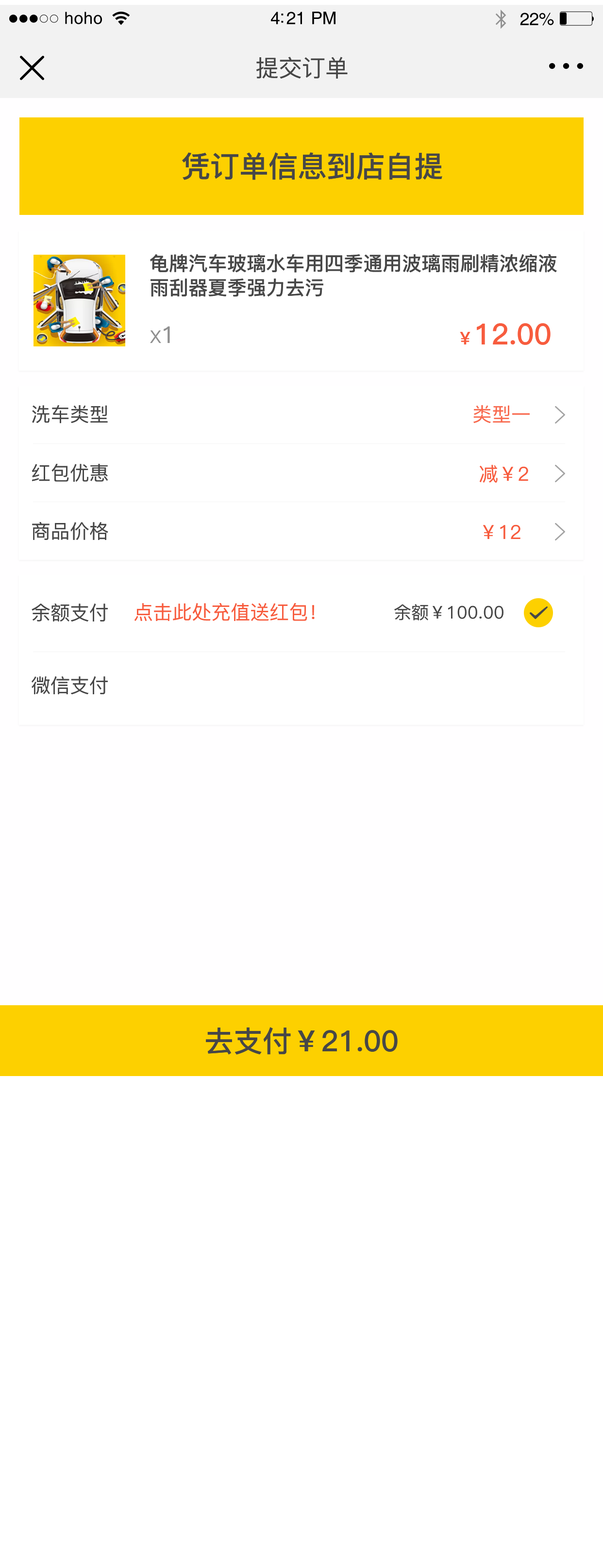
<style>
.page{position:relative;width:603px;height:1568px;background:#ffffff}
.page>*{position:absolute;margin:0}
.t1{font:16.8px "Helvetica";letter-spacing:0.02em;color:#000000}
.t2{font:17.5px "Helvetica";letter-spacing:-0.02em;color:#000000}
.t3{font:23.3px "PingFang-SC-Medium";color:#474747}
.t4{font:29.1px "PingFang-SC-Bold";color:#474747}
.t5{font:19.4px/24.3px "PingFang-SC-Bold";color:#474747}
.t6{font:17.5px "PingFang-SC-Medium";color:#909090}
.t7{font:23.3px "PingFang-SC-Medium";color:#909090}
.t8{font:29.1px "PingFang-SC-Bold";color:#f75c3e}
.t9{font:17.5px "PingFang-SC-Bold";color:#f75c3e}
.t10{font:19.4px "PingFang-SC-Medium";color:#474747}
.t11{font:19.4px "PingFang-SC-Medium";color:#f86a4f}
.t12{font:19.4px "PingFang-SC-Medium";color:#f75c3e}
.t13{font:17.5px "PingFang-SC-Medium";color:#474747}
</style>
<div class="page">
<p class="t1" style="left:65px;top:12px;width:37px;height:12px">hoho</p>
<p class="t2" style="left:271px;top:12px;width:64px;height:12px">4:21 PM</p>
<p class="t2" style="left:520px;top:13px;width:34px;height:13px">22%</p>
<p class="t3" style="left:256px;top:57px;width:91px;height:22px">提交订单</p>
<p class="t4" style="left:182px;top:152px;width:260px;height:28px">凭订单信息到店自提</p>
<p class="t5" style="left:150px;top:254px;width:406px;height:43px;text-align:justify">龟牌汽车玻璃水车用四季通用波璃雨刷精浓缩液<br>雨刮器夏季强力去污</p>
<p class="t6" style="left:150px;top:326px;width:20px;height:17px">X<span class="t7">1</span></p>
<p class="t8" style="left:459px;top:323px;width:91px;height:22px"><span class="t9">￥</span>12.00</p>
<p class="t10" style="left:32px;top:405px;width:76px;height:19px">洗车类型</p>
<p class="t11" style="left:473px;top:405px;width:56px;height:18px">类型一</p>
<p class="t10" style="left:32px;top:464px;width:76px;height:18px">红包优惠</p>
<p class="t12" style="left:479px;top:465px;width:49px;height:18px">减￥2</p>
<p class="t10" style="left:32px;top:522px;width:76px;height:18px">商品价格</p>
<p class="t12" style="left:483px;top:524px;width:37px;height:15px">￥12</p>
<p class="t10" style="left:32px;top:604px;width:76px;height:17px">余额支付</p>
<p class="t12" style="left:134px;top:603px;width:180px;height:18px">点击此处充值送红包！</p>
<p class="t13" style="left:394px;top:604px;width:109px;height:17px">余额￥100.00</p>
<p class="t10" style="left:32px;top:676px;width:76px;height:18px">微信支付</p>
<p class="t4" style="left:206px;top:1027px;width:191px;height:28px">去支付￥21.00</p>
</div>
